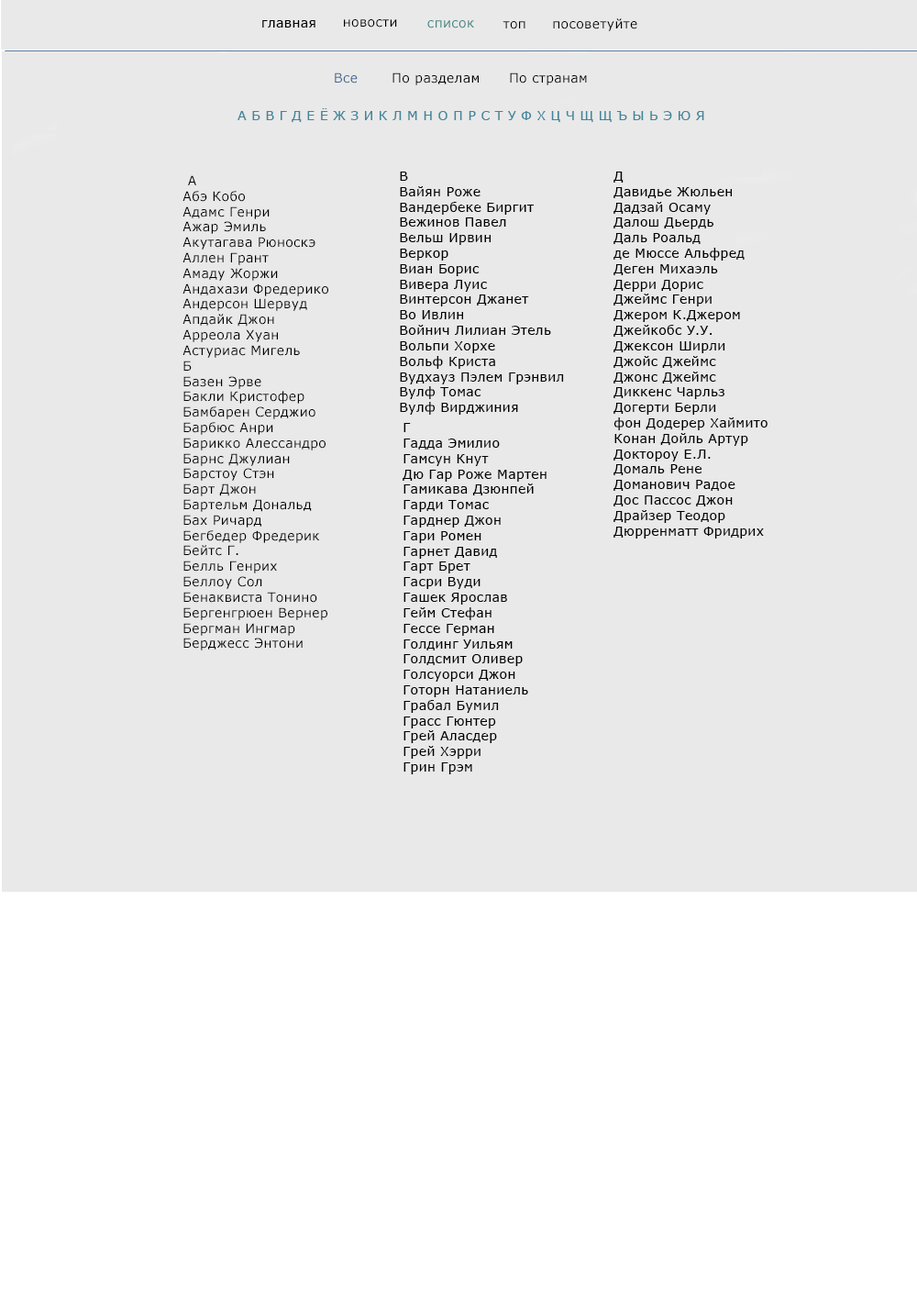
<style>
.page{position:relative;width:917px;height:1300px;background:#e9e9e9}
.page>*{position:absolute;margin:0}
.t1{font:12.8px "MSReferenceSansSerif";letter-spacing:0.025em;color:#000000}
.t2{font:12.8px "MSReferenceSansSerif";letter-spacing:0.025em;color:#3e8482}
.t3{font:12.8px "MSReferenceSansSerif";letter-spacing:0.025em;color:#3d6791}
.t4{font:12.8px "MSReferenceSansSerif";letter-spacing:0.025em;color:#41869b}
.t5{font:12.9px "MSReferenceSansSerif";letter-spacing:0.025em;color:#000000}
</style>
<div class="page">
<p class="t1" style="left:262px;top:20px;width:54px;height:8px">главная</p>
<p class="t1" style="left:344px;top:19px;width:53px;height:9px">новости</p>
<p class="t2" style="left:427px;top:20px;width:47px;height:8px">список</p>
<p class="t1" style="left:503px;top:21px;width:23px;height:8px">топ</p>
<p class="t1" style="left:553px;top:18px;width:85px;height:13px">посоветуйте</p>
<p class="t1" style="left:335px;top:72px;width:252px;height:13px"><span class="t3">Все </span>      По разделам      По странам</p>
<p class="t4" style="left:238px;top:108px;width:467px;height:14px">А Б В Г Д Е Ё Ж З И К Л М Н О П Р С Т У Ф Х Ц Ч Щ Щ Ъ Ы Ь Э Ю Я</p>
<p class="t5" style="left:400px;top:172px;width:164px;height:243px">В<br>Вайян Роже<br>Вандербеке Биргит<br>Вежинов Павел<br>Вельш Ирвин<br>Веркор<br>Виан Борис<br>Вивера Луис<br>Винтерсон Джанет<br>Во Ивлин<br>Войнич Лилиан Этель<br>Вольпи Хорхе<br>Вольф Криста<br>Вудхауз Пэлем Грэнвил<br>Вулф Томас<br>Вулф Вирджиния</p>
<p class="t5" style="left:614px;top:172px;width:154px;height:366px">Д<br>Давидье Жюльен<br>Дадзай Осаму<br>Далош Дьердь<br>Даль Роальд<br>де Мюссе Альфред<br>Деген Михаэль<br>Дерри Дорис<br>Джеймс Генри<br>Джером К.Джером<br>Джейкобс У.У.<br>Джексон Ширли<br>Джойс Джеймс<br>Джонс Джеймс<br>Диккенс Чарльз<br>Догерти Берли<br>фон Додерер Хаймито<br>Конан Дойль Артур<br>Доктороу Е.Л.<br>Домаль Рене<br>Доманович Радое<br>Дос Пассос Джон<br>Драйзер Теодор<br>Дюрренматт Фридрих</p>
<p class="t5" style="left:183px;top:175px;width:145px;height:475px">А<br>Абэ Кобо<br>Адамс Генри<br>Ажар Эмиль<br>Акутагава Рюноскэ<br>Аллен Грант<br>Амаду Жоржи<br>Андахази Фредерико<br>Андерсон Шервуд<br>Апдайк Джон<br>Арреола Хуан<br>Астуриас Мигель<br>Б <br>Базен Эрве<br>Бакли Кристофер<br>Бамбарен Серджио<br>Барбюс Анри<br>Барикко Алессандро<br>Барнс Джулиан<br>Барстоу Стэн<br>Барт Джон<br>Бартельм Дональд<br>Бах Ричард<br>Бегбедер Фредерик<br>Бейтс Г.<br>Белль Генрих<br>Беллоу Сол<br>Бенаквиста Тонино<br>Бергенгрюен Вернер<br>Бергман Ингмар<br>Берджесс Энтони</p>
<p class="t5" style="left:403px;top:423px;width:144px;height:351px">Г<br>Гадда Эмилио<br>Гамсун Кнут<br>Дю Гар Роже Мартен<br>Гамикава Дзюнпей<br>Гарди Томас<br>Гарднер Джон<br>Гари Ромен<br>Гарнет Давид<br>Гарт Брет<br>Гасри Вуди<br>Гашек Ярослав<br>Гейм Стефан<br>Гессе Герман<br>Голдинг Уильям<br>Голдсмит Оливер<br>Голсуорси Джон<br>Готорн Натаниель<br>Грабал Бумил<br>Грасс Гюнтер<br>Грей Аласдер<br>Грей Хэрри<br>Грин Грэм</p>
</div>
